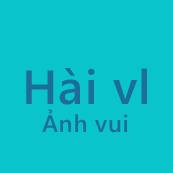
<style>
.page{position:relative;width:173px;height:173px;background:#0ac4cb}
.page>*{position:absolute;margin:0}
.t1{font:48px "SegoeWP-Semibold";letter-spacing:0.025em;color:#1d6d9b}
.t2{font:24px "SegoeWP-Semibold";letter-spacing:0.025em;color:#1d6d9b}
</style>
<div class="page">
<p class="t1" style="left:26px;top:68px;width:121px;height:37px">Hài vl</p>
<p class="t2" style="left:42px;top:109px;width:86px;height:24px">Ảnh vui</p>
</div>
